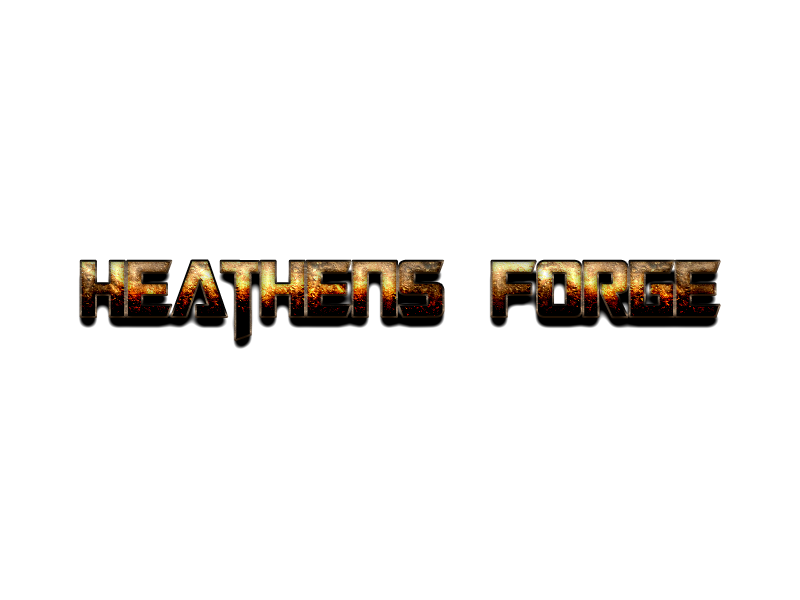
<style>
.page{position:relative;width:800px;height:600px;background:#ffffff}
.page>*{position:absolute;margin:0}
.t1{font:90px "TransformersMovie"}
</style>
<div class="page">
<p class="t1" style="left:80px;top:260px;width:640px;height:81px">Heathens Forge</p>
</div>
